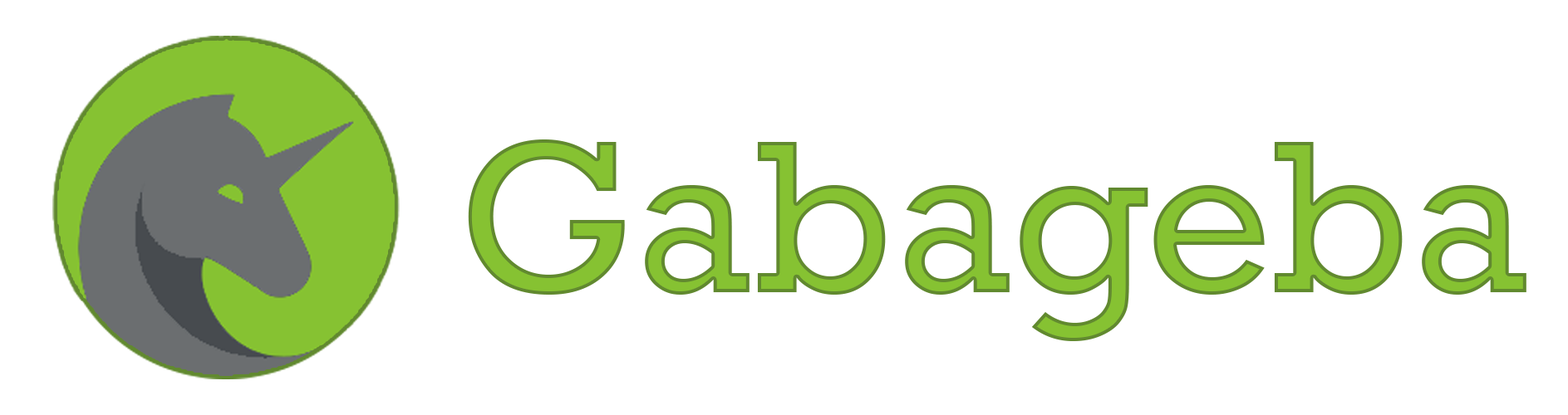
<style>
.page{position:relative;width:1568px;height:415px;background:#ffffff}
.page>*{position:absolute;margin:0}
.t1{font:221px "Rockwell";color:#86c232}
</style>
<div class="page">
<p class="t1" style="left:468px;top:140px;width:1058px;height:202px">Gabageba</p>
</div>
